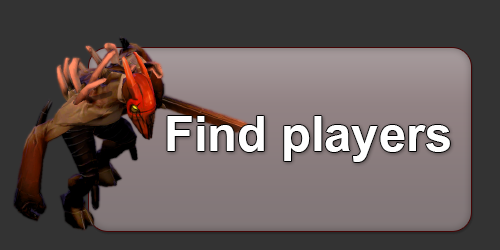
<style>
.page{position:relative;width:500px;height:250px;background:#333333}
.page>*{position:absolute;margin:0}
.t1{font:75px "BrowalliaNew-Bold";color:#ffffff}
</style>
<div class="page">
<p class="t1" style="left:167px;top:116px;width:283px;height:46px">Find players</p>
</div>
